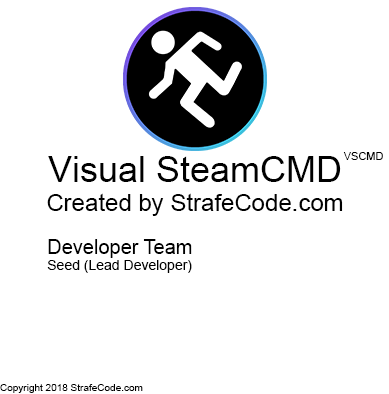
<style>
.page{position:relative;width:389px;height:394px;background:#ffffff}
.page>*{position:absolute;margin:0}
.t1{font:24px "ArialMT";color:#000000}
.t2{font:36px "ArialMT";color:#000000}
.t3{font:11px "ArialMT";color:#000000}
.t4{font:14px "ArialMT";color:#000000}
.t5{font:20px "ArialMT";color:#000000}
.t6{font:10px "ArialMT";color:#000000}
</style>
<div class="page">
<p class="t1" style="left:47px;top:156px;width:296px;height:60px;text-align:center"><span class="t2">Visual SteamCMD<br></span>Created by StrafeCode.com</p>
<p class="t3" style="left:343px;top:152px;width:40px;height:8px">VSCMD</p>
<p class="t4" style="left:47px;top:239px;width:145px;height:34px"><span class="t5">Developer Team<br></span>Seed (Lead Developer)</p>
<p class="t6" style="left:0px;top:384px;width:143px;height:9px">Copyright 2018 StrafeCode.com</p>
</div>
